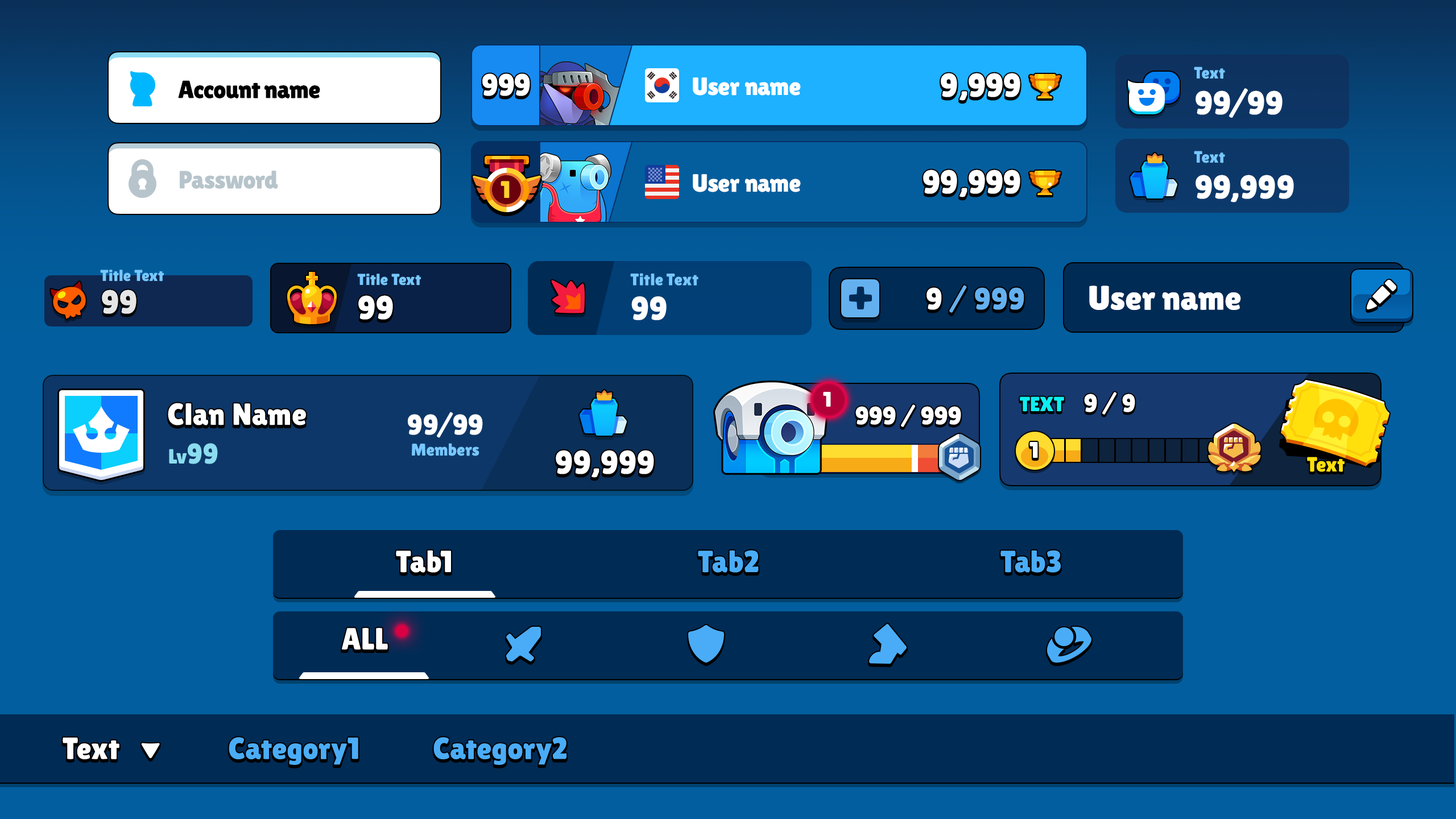
<style>
.page{position:relative;width:1456px;height:819px;background:#025e9e}
.page>*{position:absolute;margin:0}
.t1{font:30.7px "LilitaOne";color:#ffffff}
.t2{font:25px/96.7px "LilitaOne";color:#ffffff}
.t3{font:33px/96.7px "LilitaOne";color:#ffffff}
.t4{font:16.5px "LilitaOne";letter-spacing:0.02em;color:#76c7ff}
.t5{font:25px "LilitaOne";letter-spacing:-0.025em;color:#000000}
.t6{font:33px "LilitaOne";letter-spacing:0.02em;color:#ffffff}
.t7{font:25px "LilitaOne";letter-spacing:-0.025em;color:#b7c4cb}
.t8{font:33px "LilitaOne";color:#ffffff}
.t9{font:15.9px "LilitaOne";letter-spacing:0.02em;color:#76c7ff}
.t10{font:16.7px "LilitaOne";color:#76c7ff}
.t11{font:33px "LilitaOne";letter-spacing:0.02em;color:#e6e6e7}
.t12{font:30.7px "LilitaOne";letter-spacing:0.02em;color:#64b0ef}
.t13{font:30.7px "LilitaOne";letter-spacing:0.02em;color:#ffffff}
.t14{font:34.1px "LilitaOne";color:#ffffff}
.t15{font:21.2px "LilitaOne";color:#ffffff;text-transform:uppercase}
.t16{font:20.5px "LilitaOne";color:#0eeef1;text-transform:uppercase}
.t17{font:25px "LilitaOne";color:#ffffff;text-transform:uppercase}
.t18{font:28.4px "LilitaOne";letter-spacing:0.02em;color:#ffffff}
.t19{font:20.5px "LilitaOne";letter-spacing:0.02em;color:#8bdcef}
.t20{font:28.4px "LilitaOne";letter-spacing:0.02em;color:#8bdcef}
.t21{font:17.1px "LilitaOne";letter-spacing:0.02em;color:#76c7ff}
.t22{font:22.7px "LilitaOne";color:#ffffff;text-transform:uppercase}
.t23{font:20.5px "LilitaOne";color:#ffe00d}
.t24{font:30.7px "LilitaOne";letter-spacing:0.02em;color:#4aacf7}
.t25{font:30.7px "LilitaOne";letter-spacing:0.02em;color:#ffffff;text-transform:uppercase}
.t26{font:30.7px "LilitaOne";color:#4aacf7}
</style>
<div class="page">
<p class="t1" style="left:482px;top:73px;width:48px;height:23px">999</p>
<p class="t2" style="left:693px;top:77px;width:108px;height:115px">User name<br>User name</p>
<p class="t3" style="left:941px;top:73px;width:16px;height:121px;text-align:center">9<br>9</p>
<p class="t3" style="left:969px;top:73px;width:16px;height:121px;text-align:center">9<br>9</p>
<p class="t3" style="left:986px;top:73px;width:17px;height:121px;text-align:center">9<br>9</p>
<p class="t3" style="left:1004px;top:73px;width:16px;height:121px;text-align:center">9<br>9</p>
<p class="t4" style="left:1194px;top:67px;width:31px;height:12px">Text</p>
<p class="t5" style="left:178px;top:80px;width:142px;height:18px">Account name</p>
<p class="t6" style="left:1195px;top:88px;width:88px;height:30px">99/99</p>
<p class="t3" style="left:959px;top:91px;width:8px;height:106px;text-align:center">,<br>,</p>
<p class="t4" style="left:1194px;top:151px;width:31px;height:12px">Text</p>
<p class="t7" style="left:180px;top:171px;width:98px;height:18px">Password</p>
<p class="t8" style="left:923px;top:169px;width:17px;height:25px">9</p>
<p class="t6" style="left:1195px;top:175px;width:99px;height:27px">99,999</p>
<p class="t9" style="left:100px;top:270px;width:64px;height:12px">Title Text</p>
<p class="t9" style="left:357px;top:274px;width:64px;height:12px">Title Text</p>
<p class="t10" style="left:630px;top:273px;width:68px;height:13px">Title Text</p>
<p class="t11" style="left:102px;top:289px;width:34px;height:25px">99</p>
<p class="t12" style="left:926px;top:285px;width:98px;height:28px"><span class="t13">9 </span>/ 999</p>
<p class="t14" style="left:1089px;top:286px;width:152px;height:24px">User name</p>
<p class="t6" style="left:358px;top:295px;width:35px;height:25px">99</p>
<p class="t8" style="left:631px;top:296px;width:36px;height:24px">99</p>
<p class="t15" style="left:823px;top:392px;width:8px;height:15px">1</p>
<p class="t16" style="left:1020px;top:396px;width:44px;height:16px">Text</p>
<p class="t17" style="left:1084px;top:392px;width:51px;height:23px">9 / 9</p>
<p class="t13" style="left:168px;top:403px;width:138px;height:22px">Clan Name</p>
<p class="t18" style="left:408px;top:412px;width:75px;height:26px">99/99</p>
<p class="t17" style="left:855px;top:404px;width:106px;height:23px">999 / 999</p>
<p class="t19" style="left:169px;top:443px;width:49px;height:21px">Lv<span class="t20">99</span></p>
<p class="t21" style="left:412px;top:443px;width:67px;height:13px">Members</p>
<p class="t6" style="left:556px;top:450px;width:98px;height:28px">99,999</p>
<p class="t22" style="left:1029px;top:442px;width:9px;height:16px">1</p>
<p class="t23" style="left:1307px;top:457px;width:38px;height:15px">Text</p>
<p class="t13" style="left:396px;top:550px;width:55px;height:23px">Tab1</p>
<p class="t24" style="left:698px;top:550px;width:61px;height:23px">Tab2</p>
<p class="t24" style="left:1000px;top:550px;width:61px;height:23px">Tab3</p>
<p class="t25" style="left:341px;top:628px;width:47px;height:22px">All</p>
<p class="t1" style="left:63px;top:737px;width:56px;height:22px">Text</p>
<p class="t26" style="left:229px;top:737px;width:129px;height:28px">Category1</p>
<p class="t26" style="left:433px;top:737px;width:134px;height:28px">Category2</p>
</div>
